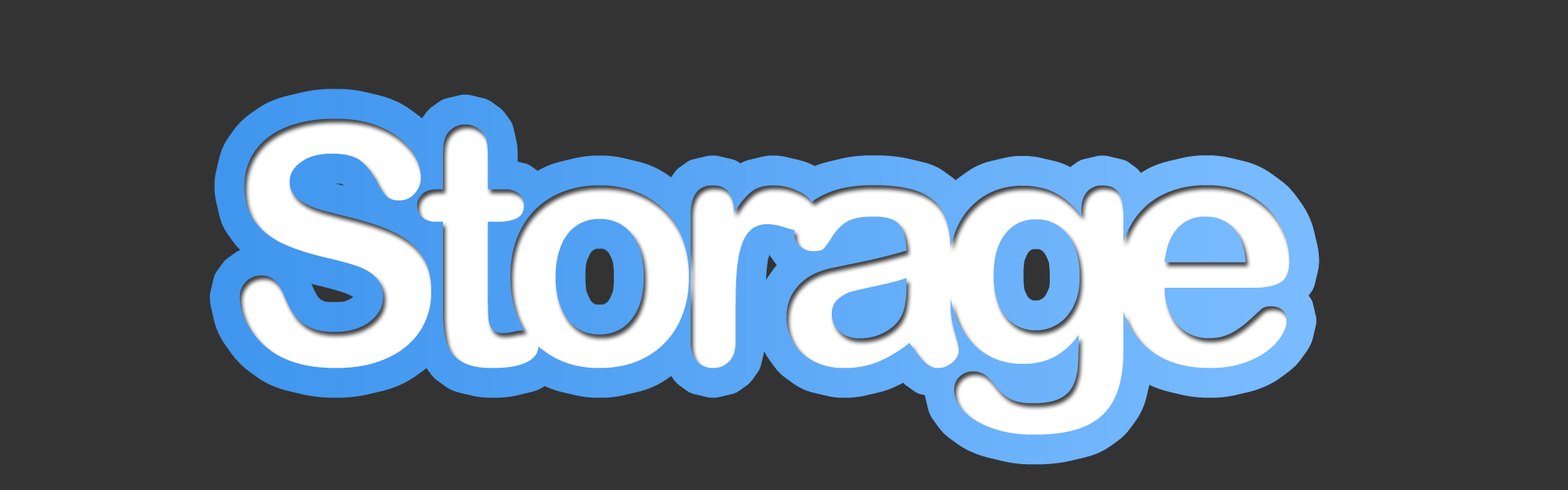
<style>
.page{position:relative;width:1568px;height:490px;background:#333333}
.page>*{position:absolute;margin:0}
.t1{font:336.5px "ArialRoundedMTBold";letter-spacing:-0.1em;color:#ffffff}
</style>
<div class="page">
<p class="t1" style="left:239px;top:118px;width:1051px;height:317px">Storage</p>
</div>
